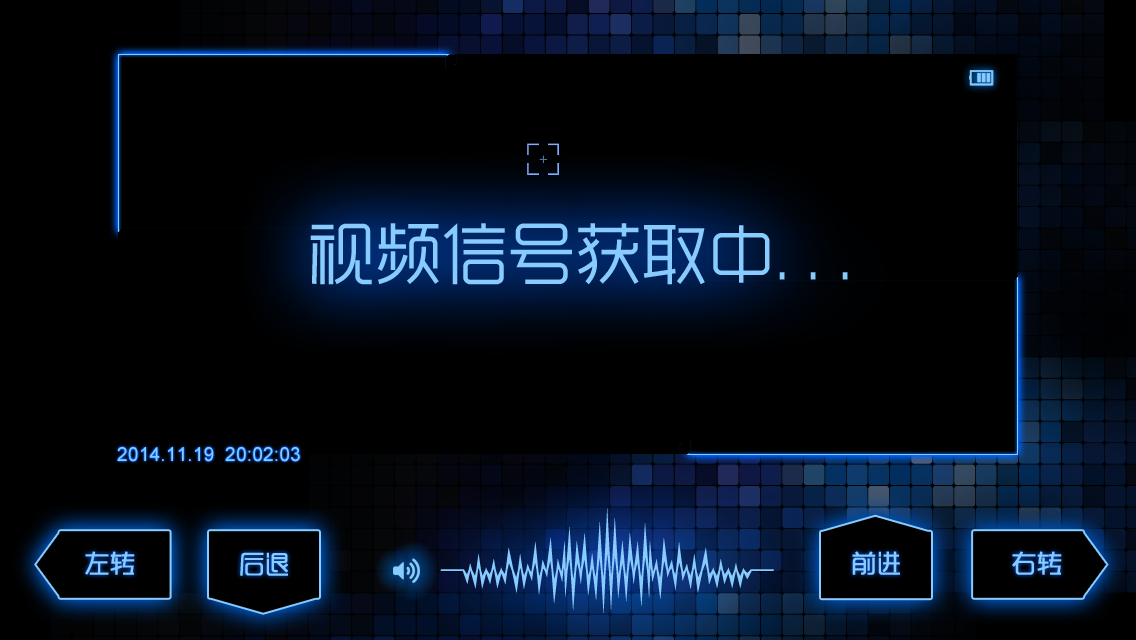
<style>
.page{position:relative;width:1136px;height:640px;background:#000000}
.page>*{position:absolute;margin:0}
.t1{font:66.7px "MFYueHei_Noncommercial-Regular";color:#87cbff}
.t2{font:19.4px "ArialMT";color:#87cbff}
.t3{font:25px "MFYueHei_Noncommercial-Regular";color:#87cbff;font-weight:bold}
</style>
<div class="page">
<p class="t1" style="left:310px;top:223px;width:538px;height:62px">视频信号获取中. . .</p>
<p class="t2" style="left:117px;top:447px;width:183px;height:15px">2014.11.19  20:02:03</p>
<p class="t3" style="left:85px;top:551px;width:50px;height:24px">左转</p>
<p class="t3" style="left:240px;top:552px;width:48px;height:24px">后退</p>
<p class="t3" style="left:852px;top:551px;width:48px;height:24px">前进</p>
<p class="t3" style="left:1012px;top:551px;width:50px;height:24px">右转</p>
</div>
